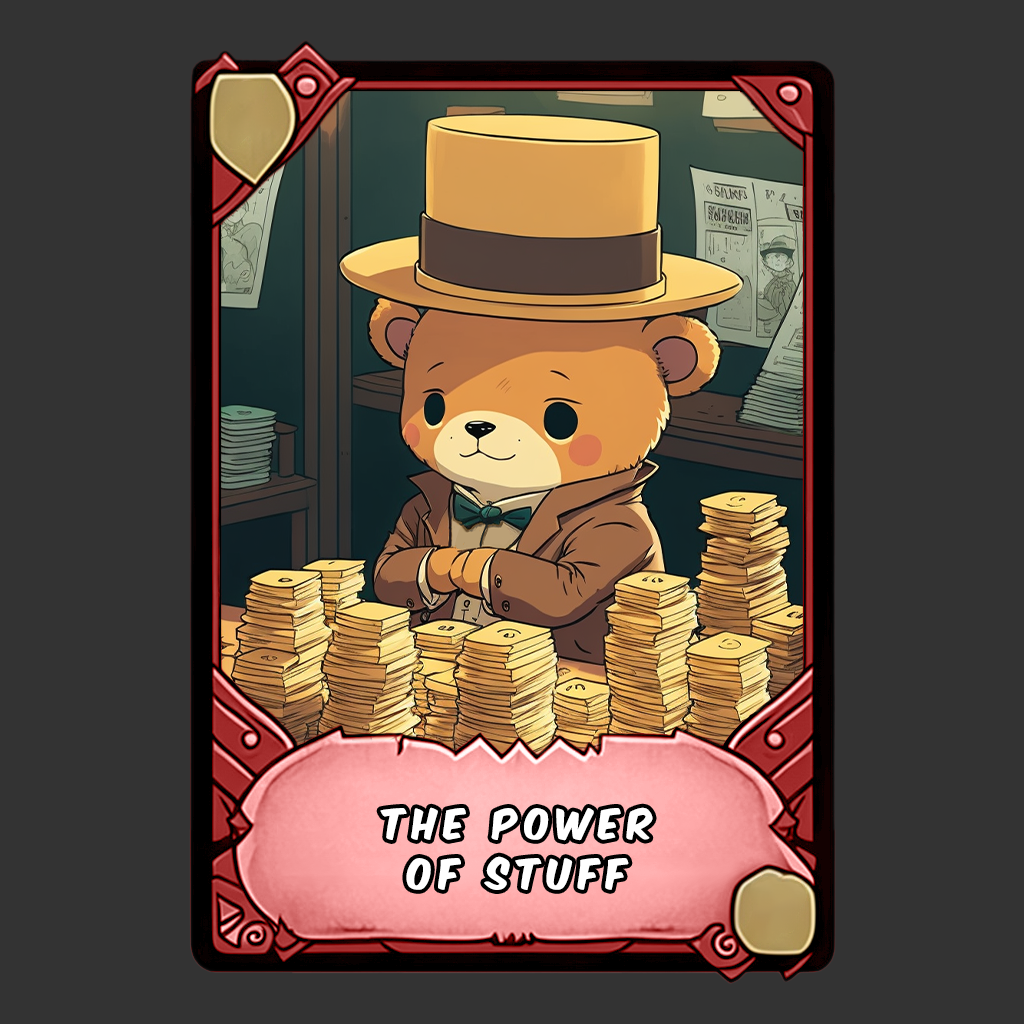
<style>
.page{position:relative;width:1024px;height:1024px;background:#333333}
.page>*{position:absolute;margin:0}
.t1{font:36px/50px "KomikaAxis";letter-spacing:0.2em;color:#ffffff}
</style>
<div class="page">
<p class="t1" style="left:380px;top:807px;width:273px;height:83px;text-align:center">the power<br>of stuff</p>
</div>
